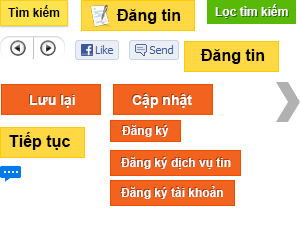
<style>
.page{position:relative;width:300px;height:250px;background:#ffffff}
.page>*{position:absolute;margin:0}
.t1{font:12px "Arial-BoldMT";color:#000000}
.t2{font:12px "Arial-BoldMT";color:#ffffff}
.t3{font:16px "Arial-BoldMT";color:#000000}
.t4{font:14px "Arial-BoldMT";color:#ffffff}
</style>
<div class="page">
<p class="t1" style="left:8px;top:5px;width:52px;height:12px">Tìm kiếm</p>
<p class="t2" style="left:215px;top:4px;width:73px;height:14px">Lọc tìm kiếm</p>
<p class="t3" style="left:116px;top:9px;width:65px;height:15px">Đăng tin</p>
<p class="t3" style="left:200px;top:49px;width:65px;height:15px">Đăng tin</p>
<p class="t4" style="left:30px;top:95px;width:45px;height:13px">Lưu lại</p>
<p class="t4" style="left:132px;top:94px;width:60px;height:14px">Cập nhật</p>
<p class="t2" style="left:122px;top:125px;width:47px;height:12px">Đăng ký</p>
<p class="t3" style="left:9px;top:132px;width:61px;height:18px">Tiếp tục</p>
<p class="t2" style="left:121px;top:157px;width:110px;height:12px">Đăng ký dịch vụ tin</p>
<p class="t2" style="left:121px;top:186px;width:102px;height:13px">Đăng ký tài khoản</p>
</div>
